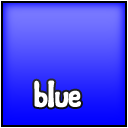
<style>
.page{position:relative;width:128px;height:128px}
.page>*{position:absolute;margin:0}
.t1{font:36px "ChubbyCheeks";color:#ffffff}
</style>
<div class="page">
<p class="t1" style="left:34px;top:80px;width:47px;height:28px">blue</p>
</div>
